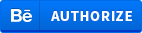
<style>
.page{position:relative;width:142px;height:33px}
.page>*{position:absolute;margin:0}
.t1{font:15px "SourceSansPro-Bold";letter-spacing:0.04em;color:#ffffff}
</style>
<div class="page">
<p class="t1" style="left:51px;top:11px;width:81px;height:10px">AUTHORIZE</p>
</div>
